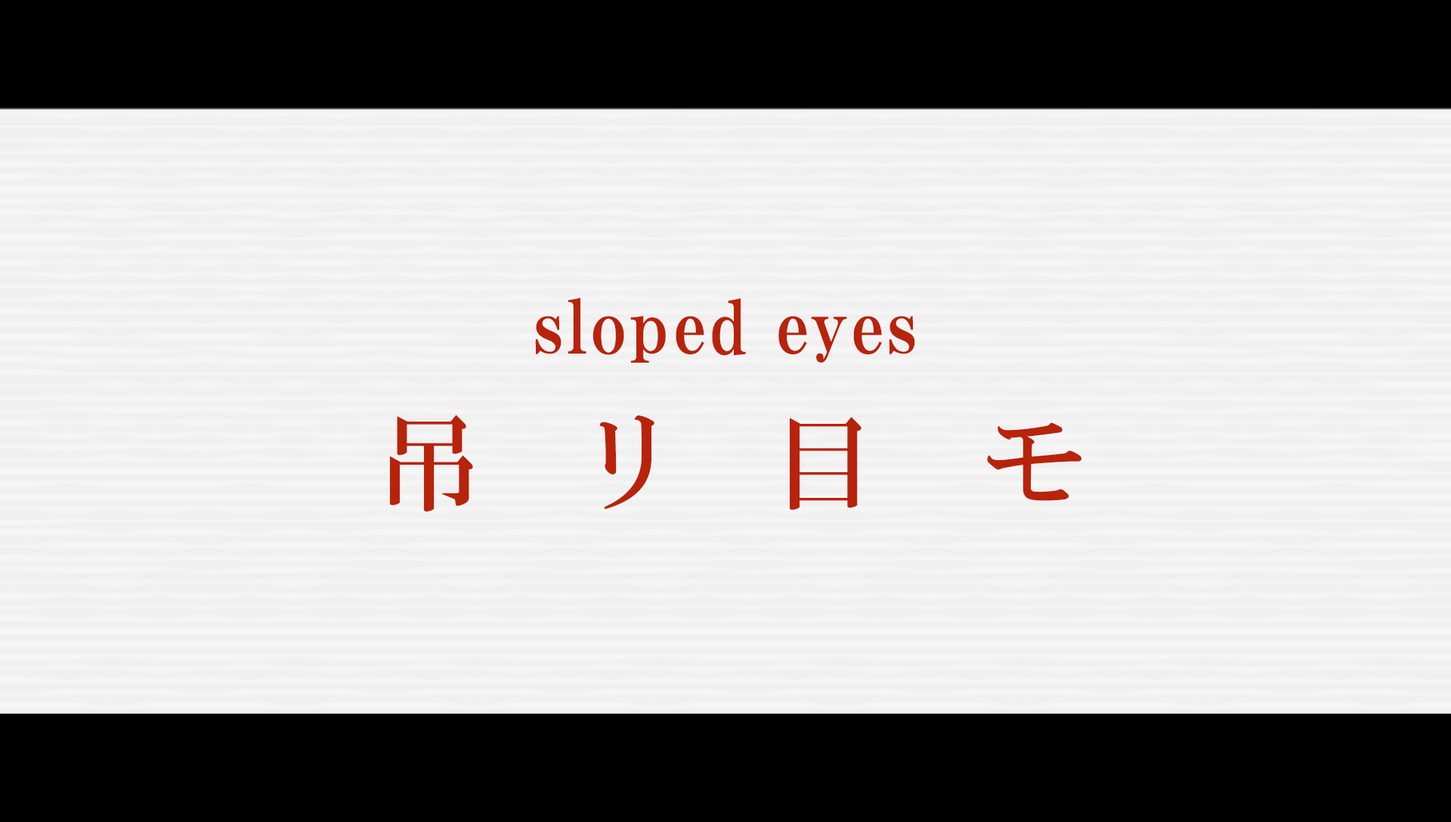
<style>
.page{position:relative;width:1451px;height:822px;background:#f0f0f0}
.page>*{position:absolute;margin:0}
.t1{font:72.5px "HGPMinchoE";letter-spacing:0.025em;color:#b8230b}
.t2{font:107.8px "HGMinchoB";letter-spacing:0.85em;color:#b8230b}
.t3{font:107.8px "HGMinchoB";letter-spacing:0.8em;color:#b8230b}
.t4{font:107.8px "HGMinchoB";letter-spacing:0.95em;color:#b8230b}
</style>
<div class="page">
<p class="t1" style="left:535px;top:298px;width:380px;height:65px">sloped eyes</p>
<p class="t2" style="left:390px;top:415px;width:691px;height:96px">吊<span class="t3">リ</span><span class="t4">目</span>モ</p>
</div>
